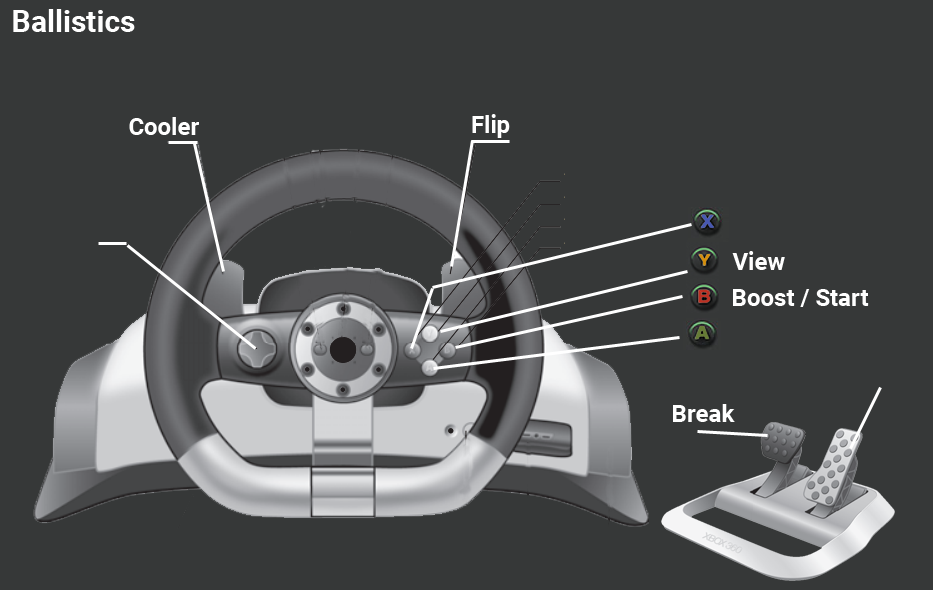
<style>
.page{position:relative;width:933px;height:590px;background:#363838}
.page>*{position:absolute;margin:0}
.t1{font:30px "Roboto-Bold";color:#ffffff}
.t2{font:24px "Roboto-Bold";color:#ffffff}
</style>
<div class="page">
<p class="t1" style="left:13px;top:9px;width:122px;height:23px">Ballistics</p>
<p class="t2" style="left:129px;top:117px;width:70px;height:18px">Cooler</p>
<p class="t2" style="left:472px;top:114px;width:38px;height:24px">Flip</p>
<p class="t2" style="left:732px;top:251px;width:53px;height:19px">View</p>
<p class="t2" style="left:733px;top:289px;width:136px;height:18px">Boost / Start</p>
<p class="t2" style="left:673px;top:404px;width:62px;height:18px">Break</p>
</div>
